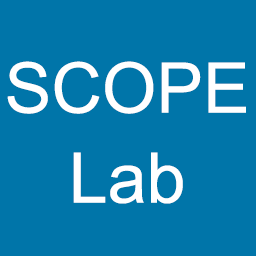
<style>
.page{position:relative;width:256px;height:256px;background:#0075a9}
.page>*{position:absolute;margin:0}
.t1{font:70px/90px "ArialMT";color:#ffffff}
</style>
<div class="page">
<p class="t1" style="left:7px;top:61px;width:239px;height:143px;text-align:center">SCOPE<br>Lab</p>
</div>
